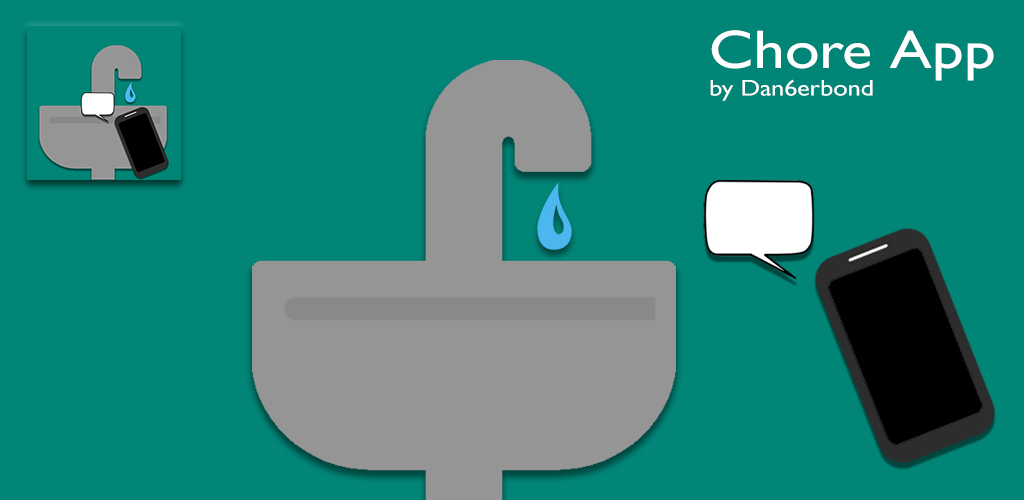
<style>
.page{position:relative;width:1024px;height:500px;background:#018577}
.page>*{position:absolute;margin:0}
.t1{font:22.8px "GillSansNova";color:#ffffff;scale:1.15 1}
.t2{font:54.8px "GillSansNova";color:#ffffff;scale:1.15 1}
</style>
<div class="page">
<p class="t1" style="left:710px;top:30px;width:284px;height:71px"><span class="t2">Chore App<br></span>by Dan6erbond</p>
</div>
